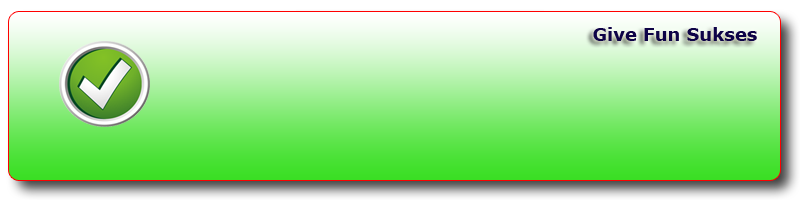
<style>
.page{position:relative;width:800px;height:200px}
.page>*{position:absolute;margin:0}
.t1{font:18px "Verdana-Bold";color:#0e0347}
</style>
<div class="page">
<p class="t1" style="left:593px;top:27px;width:164px;height:14px">Give Fun Sukses</p>
</div>
